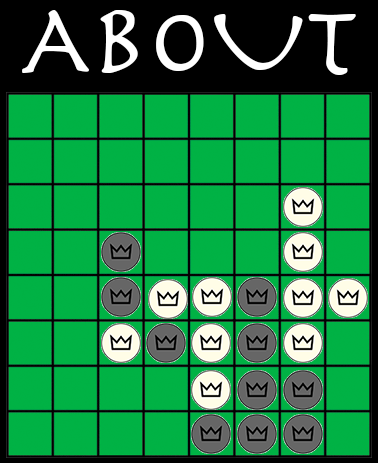
<style>
.page{position:relative;width:378px;height:463px;background:#000000}
.page>*{position:absolute;margin:0}
.t1{font:104.2px "Herculanum";color:#ffffff}
</style>
<div class="page">
<p class="t1" style="left:22px;top:10px;width:334px;height:65px">ABOUT</p>
</div>
